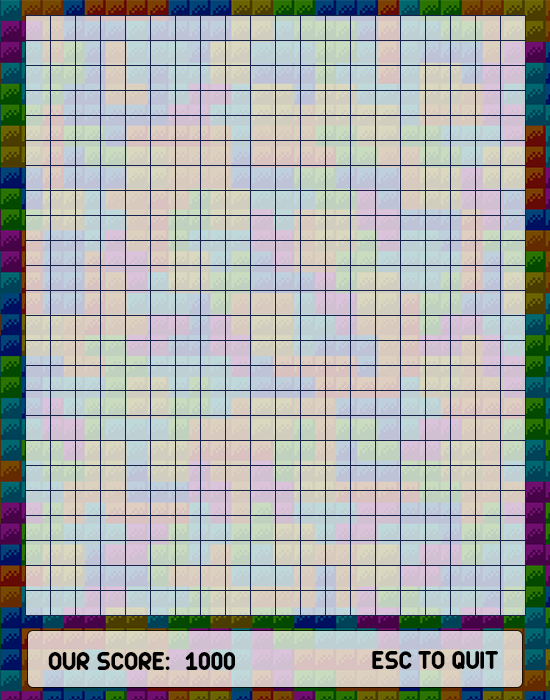
<style>
.page{position:relative;width:550px;height:700px}
.page>*{position:absolute;margin:0}
.t1{font:28px "zArista";color:#000000;text-transform:uppercase}
</style>
<div class="page">
<p class="t1" style="left:48px;top:652px;width:122px;height:18px">OUR SCORE:</p>
<p class="t1" style="left:185px;top:652px;width:50px;height:18px">1000</p>
<p class="t1" style="left:372px;top:651px;width:126px;height:18px">ESC to quit</p>
</div>
